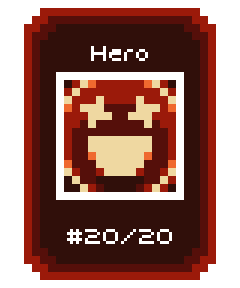
<style>
.page{position:relative;width:240px;height:288px;background:#ffffff}
.page>*{position:absolute;margin:0}
.t1{font:15px "Micro_Chat";color:#ffffff}
</style>
<div class="page">
<p class="t1" style="left:90px;top:46px;width:58px;height:15px">Hero</p>
<p class="t1" style="left:67px;top:228px;width:106px;height:17px">#20/20</p>
</div>
